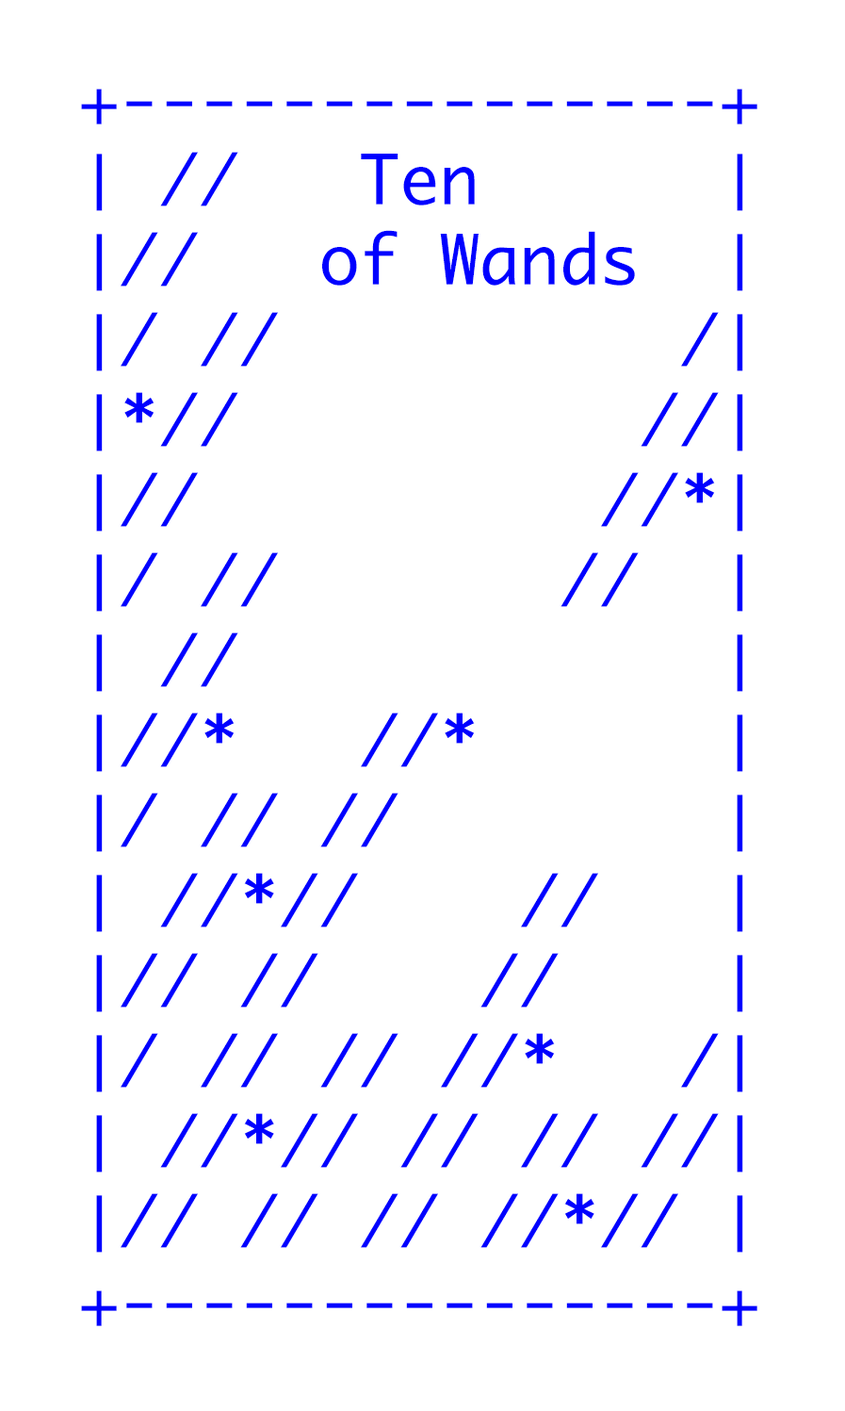
<style>
.page{position:relative;width:845px;height:1411px;background:#ffffff}
.page>*{position:absolute;margin:0}
.t1{font:66.7px "Monaco";color:#0000ff}
</style>
<div class="page">
<p class="t1" style="left:81px;top:89px;width:677px;height:1237px">+---------------+<br>│ //   Ten      │<br>│//   of Wands  │<br>│/ //          /│<br>│*//          //│<br>│//          //*│<br>│/ //       //  │<br>│ //            │ <br>│//*   //*      │ <br>│/ // //        │<br>│ //*//    //   │ <br>│// //    //    │ <br>│/ // // //*   /│<br>│ //*// // // //│<br>│// // // //*// │<br>+---------------+</p>
</div>
